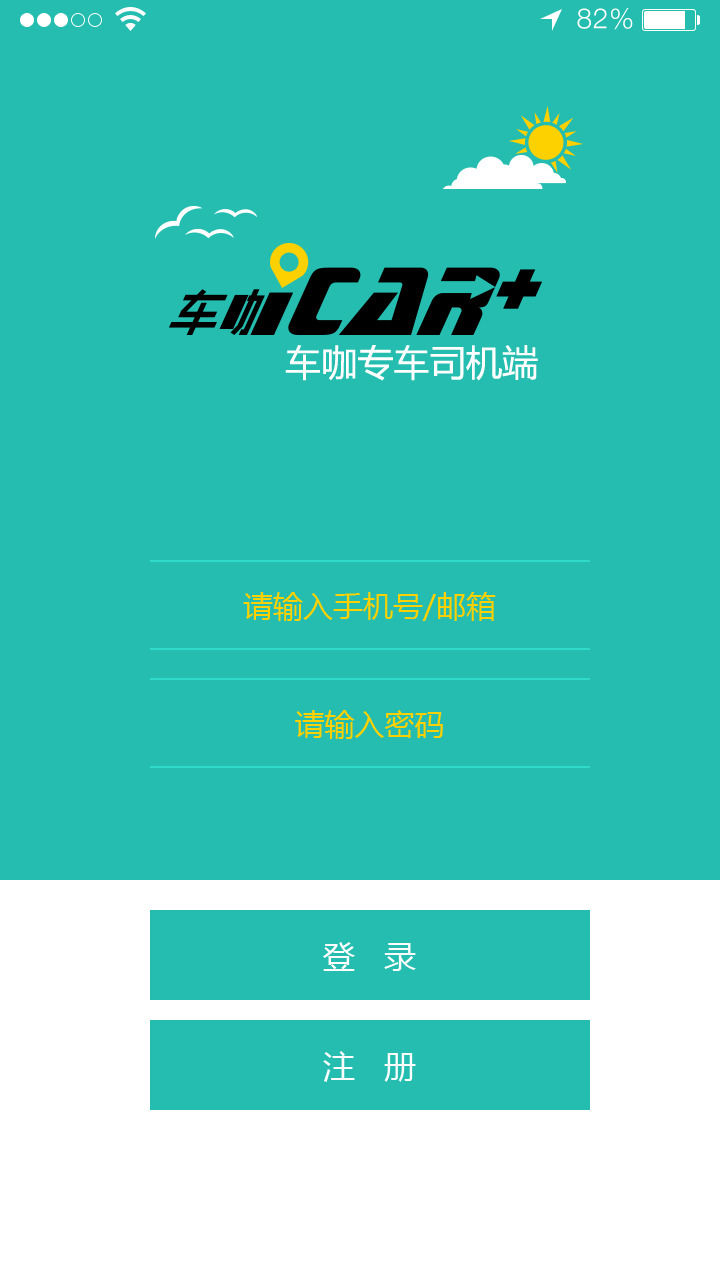
<style>
.page{position:relative;width:720px;height:1280px;background:#25bdb0}
.page>*{position:absolute;margin:0}
.t1{font:28px "HelveticaNeue-Light";letter-spacing:0.025em;color:#ffffff}
.t2{font:36.2px "MicrosoftYaHei";color:#ffffff}
.t3{font:30px "MicrosoftYaHei";color:#fdd000}
.t4{font:32px "MicrosoftYaHei";letter-spacing:0.02em;color:#ffffff}
</style>
<div class="page">
<p class="t1" style="left:577px;top:8px;width:56px;height:22px">82%</p>
<p class="t2" style="left:285px;top:345px;width:253px;height:36px">车咖专车司机端</p>
<p class="t3" style="left:243px;top:592px;width:253px;height:29px">请输入手机号/邮箱</p>
<p class="t3" style="left:295px;top:710px;width:148px;height:29px">请输入密码</p>
<p class="t4" style="left:323px;top:942px;width:93px;height:29px">登   录</p>
<p class="t4" style="left:323px;top:1051px;width:93px;height:31px">注   册</p>
</div>
